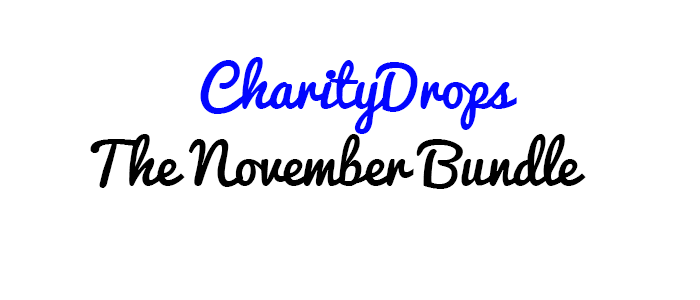
<style>
.page{position:relative;width:700px;height:300px;background:#ffffff}
.page>*{position:absolute;margin:0}
.t1{font:55.6px "Pacifico";color:#0206ff}
.t2{font:55.6px "Pacifico";color:#000000}
</style>
<div class="page">
<p class="t1" style="left:200px;top:57px;width:317px;height:77px">CharityDrops</p>
<p class="t2" style="left:90px;top:134px;width:496px;height:55px">The November Bundle</p>
</div>
